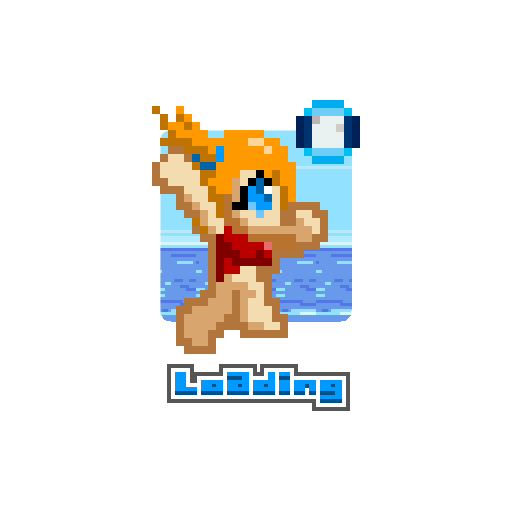
<style>
.page{position:relative;width:512px;height:512px;background:#ffffff}
.page>*{position:absolute;margin:0}
.t1{font:30px "Arkadeland"}
.t2{font:30px "Arkadeland";color:#0099ff}
</style>
<div class="page">
<p class="t1" style="left:175px;top:376px;width:167px;height:27px">Loading</p>
<p class="t2" style="left:175px;top:372px;width:167px;height:27px">Loading</p>
</div>
